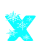
<style>
.page{position:relative;width:40px;height:51px;background:#ffffff}
.page>*{position:absolute;margin:0}
.t1{font:41.1px "winterflakes";color:#0ffcff;scale:1.32 1}
</style>
<div class="page">
<p class="t1" style="left:5px;top:10px;width:31px;height:31px">X</p>
</div>
